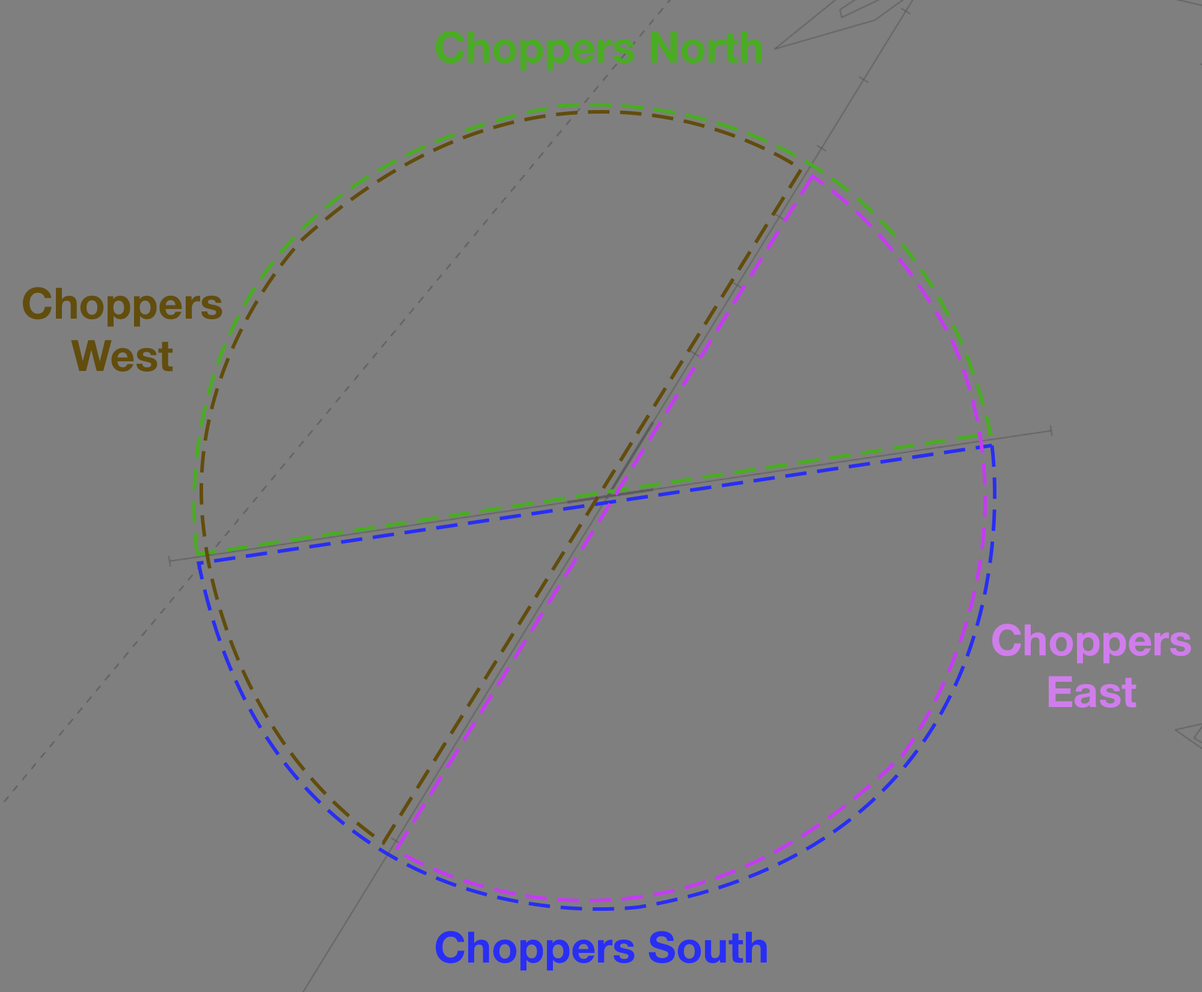
<style>
.page{position:relative;width:1202px;height:992px;background:#7f7f7f}
.page>*{position:absolute;margin:0}
.t1{font:43.3px "HelveticaNeue-Bold";color:#49ac22}
.t2{font:43.3px "HelveticaNeue-Bold";color:#624d0d}
.t3{font:43.3px "HelveticaNeue-Bold";color:#d07dec}
.t4{font:43.3px "HelveticaNeue-Bold";color:#292ef5}
</style>
<div class="page">
<p class="t1" style="left:436px;top:31px;width:326px;height:40px">Choppers North</p>
<p class="t2" style="left:23px;top:287px;width:199px;height:84px;text-align:center">Choppers<br>West</p>
<p class="t3" style="left:992px;top:623px;width:199px;height:85px;text-align:center">Choppers<br>East</p>
<p class="t4" style="left:436px;top:931px;width:331px;height:40px">Choppers South</p>
</div>
